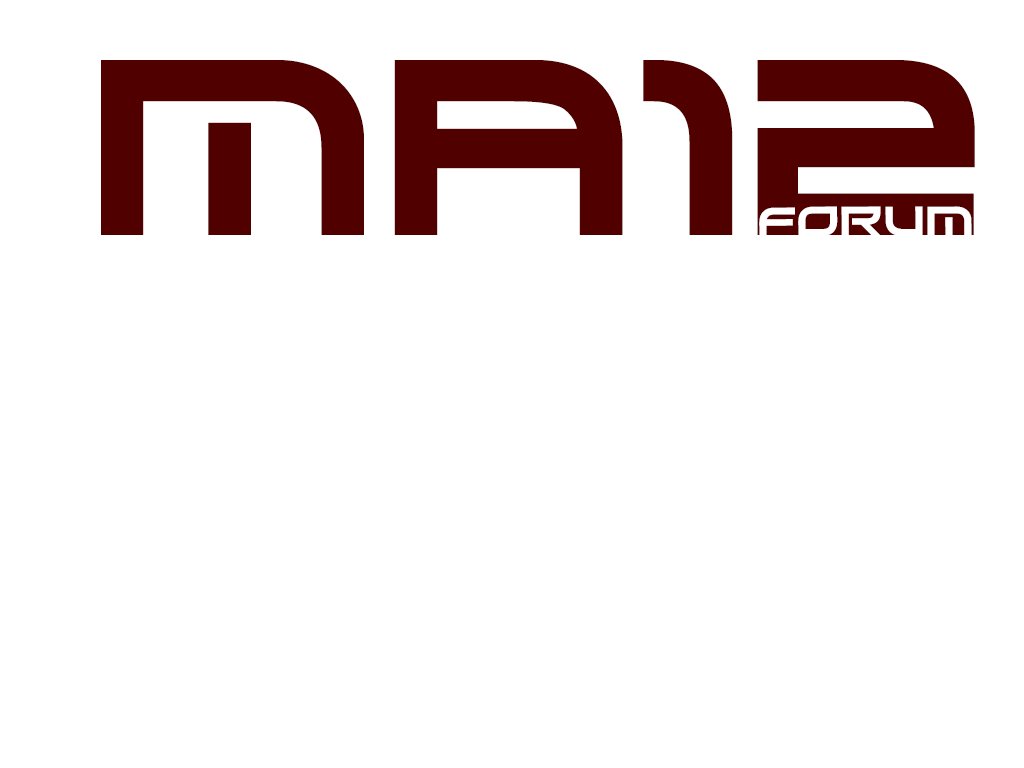
<style>
.page{position:relative;width:1024px;height:768px;background:#ffffff}
.page>*{position:absolute;margin:0}
.t1{font:250px "Xirod-Regular";color:#510000}
.t2{font:41.7px "Xirod-Regular";color:#ffffff}
</style>
<div class="page">
<p class="t1" style="left:101px;top:60px;width:874px;height:175px">ma12</p>
<p class="t2" style="left:759px;top:206px;width:213px;height:31px">Forum</p>
</div>
